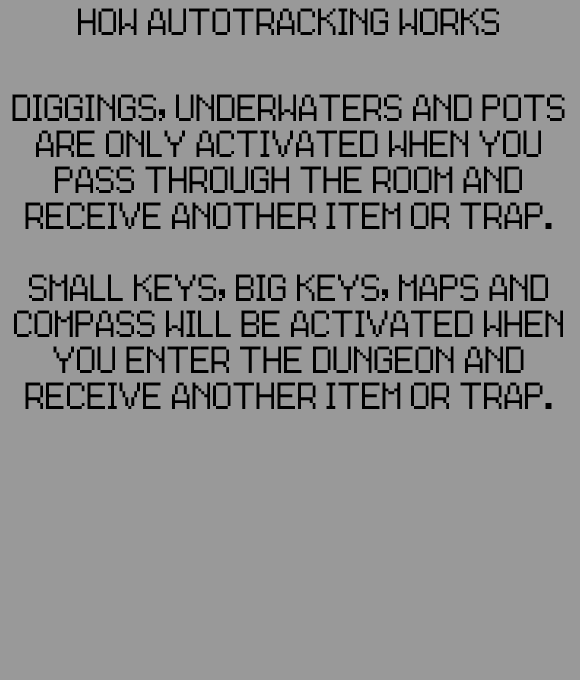
<style>
.page{position:relative;width:580px;height:680px;background:#999999}
.page>*{position:absolute;margin:0}
.t1{font:30px "ZeldaOracles";color:#000000}
</style>
<div class="page">
<p class="t1" style="left:12px;top:8px;width:553px;height:401px;text-align:center">HOW AUTOTRACKING WORKS<br><br>DIGGINGS, UNDERWATERS AND POTS ARE ONLY ACTIVATED WHEN YOU PASS THROUGH THE ROOM AND RECEIVE ANOTHER ITEM OR TRAP.<br><br>SMALL KEYS, BIG KEYS, MAPS AND COMPASS WILL BE ACTIVATED WHEN YOU ENTER THE DUNGEON AND RECEIVE ANOTHER ITEM OR TRAP.</p>
</div>
